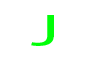
<style>
.page{position:relative;width:100px;height:75px;background:#ffffff}
.page>*{position:absolute;margin:0}
.t1{font:44.6px "MyriadPro-Regular";color:#00ff08;scale:1.72 1}
</style>
<div class="page">
<p class="t1" style="left:31px;top:15px;width:23px;height:31px">J</p>
</div>
